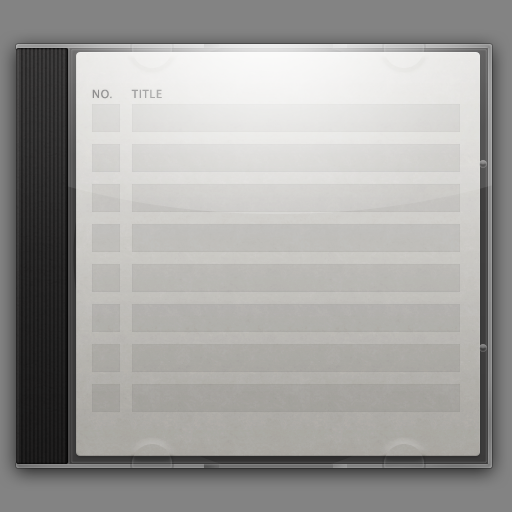
<style>
.page{position:relative;width:512px;height:512px}
.page>*{position:absolute;margin:0}
.t1{font:12px "MyriadPro-Regular";letter-spacing:0.075em;color:#8f8f8f;text-transform:uppercase}
.t2{font:12px "MyriadPro-Regular";letter-spacing:0.075em;color:#a7a7a7;text-transform:uppercase}
</style>
<div class="page">
<p class="t1" style="left:92px;top:89px;width:20px;height:10px">No.</p>
<p class="t2" style="left:131px;top:89px;width:31px;height:9px">title</p>
</div>
